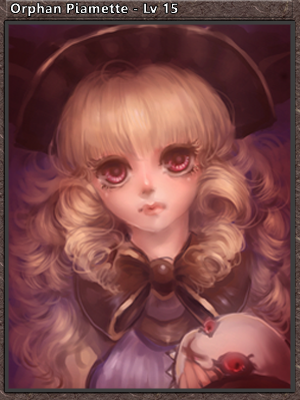
<style>
.page{position:relative;width:300px;height:400px}
.page>*{position:absolute;margin:0}
.t1{font:14px "Leelawadee-Bold";font-weight:bold}
</style>
<div class="page">
<p class="t1" style="left:10px;top:2px;width:168px;height:15px">Orphan Piamette - Lv 15</p>
</div>
